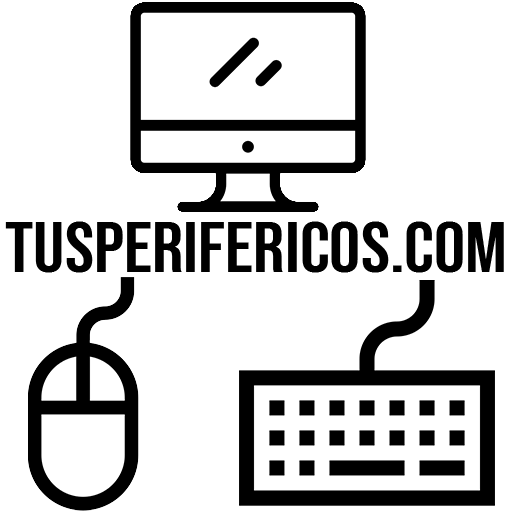
<style>
.page{position:relative;width:512px;height:512px;background:#ffffff}
.page>*{position:absolute;margin:0}
.t1{font:71.7px "BebasNeue-Regular";color:#000000;scale:1.09 1}
</style>
<div class="page">
<p class="t1" style="left:5px;top:221px;width:499px;height:52px">TUSPERIFERICOS.COM</p>
</div>
